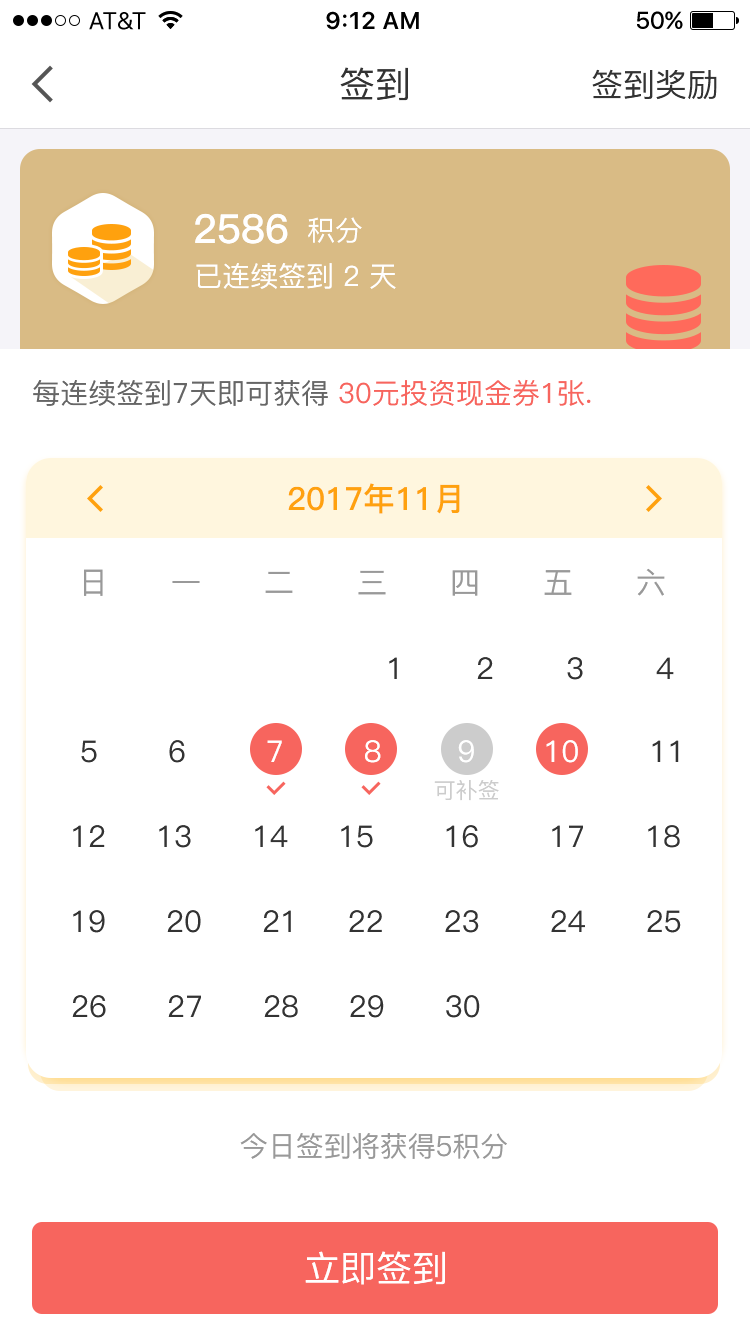
<style>
.page{position:relative;width:750px;height:1334px;background:#ffffff}
.page>*{position:absolute;margin:0}
.t1{font:36px "PingFang-SC-Medium";color:#333333}
.t2{font:32px "PingFang-SC-Medium";color:#333333}
.t3{font:40px "PingFang-SC-Bold";color:#ffffff}
.t4{font:28px "PingFang-SC-Medium";color:#ffffff}
.t5{font:28px "PingFang-SC-Medium";color:#666666}
.t6{font:28px "PingFang-SC-Medium";color:#f7655e}
.t7{font:32px "PingFang-SC-Bold";color:#ffa10e}
.t8{font:30px "PingFang-SC-Medium";letter-spacing:2.1em;color:#999999}
.t9{font:30px "PingFang-SC-Medium";letter-spacing:2.4em;color:#333333}
.t10{font:30px "PingFang-SC-Medium";color:#ffffff}
.t11{font:30px "PingFang-SC-Medium";color:#333333}
.t12{font:22px "PingFang-SC-Medium";color:#cccccc}
.t13{font:28px "PingFang-SC-Medium";color:#999999}
.t14{font:36px "PingFang-SC-Medium";color:#ffffff}
</style>
<div class="page">
<p class="t1" style="left:340px;top:67px;width:68px;height:34px">签到</p>
<p class="t2" style="left:592px;top:69px;width:125px;height:31px">签到奖励</p>
<p class="t3" style="left:195px;top:213px;width:93px;height:31px">2586</p>
<p class="t4" style="left:308px;top:217px;width:54px;height:26px">积分</p>
<p class="t4" style="left:196px;top:263px;width:200px;height:26px">已连续签到 2 天</p>
<p class="t5" style="left:33px;top:379px;width:558px;height:27px">每连续签到7天即可获得 <span class="t6">30元投资现金券1张.</span></p>
<p class="t7" style="left:288px;top:483px;width:172px;height:31px">2017年11月</p>
<p class="t8" style="left:84px;top:568px;width:581px;height:28px">日一二三四五六</p>
<p class="t9" style="left:389px;top:657px;width:285px;height:23px">1234</p>
<p class="t10" style="left:81px;top:740px;width:598px;height:23px"><span class="t11">5       6         </span>7        8        9       10<span class="t11">       11</span></p>
<p class="t12" style="left:434px;top:780px;width:65px;height:21px">可补签</p>
<p class="t11" style="left:73px;top:825px;width:607px;height:23px">12     13      14     15       16       17      18</p>
<p class="t11" style="left:73px;top:910px;width:608px;height:23px">19      20      21     22      23       24      25</p>
<p class="t11" style="left:72px;top:995px;width:408px;height:23px">26      27      28     29      30</p>
<p class="t13" style="left:240px;top:1133px;width:267px;height:26px">今日签到将获得5积分</p>
<p class="t14" style="left:305px;top:1251px;width:140px;height:34px">立即签到</p>
</div>
